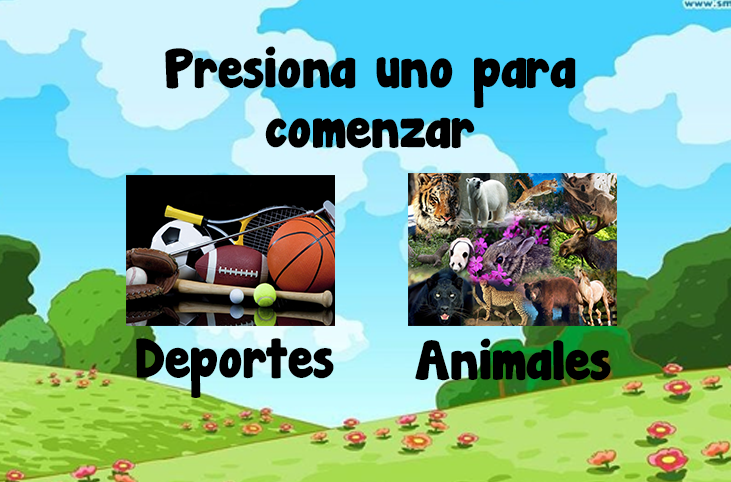
<style>
.page{position:relative;width:731px;height:482px}
.page>*{position:absolute;margin:0}
.t1{font:50px "JandaManateeSolid";color:#000000}
</style>
<div class="page">
<p class="t1" style="left:165px;top:46px;width:411px;height:103px;text-align:center">Presiona uno para comenzar</p>
<p class="t1" style="left:136px;top:338px;width:198px;height:60px">Deportes</p>
<p class="t1" style="left:415px;top:338px;width:196px;height:43px">Animales</p>
</div>
